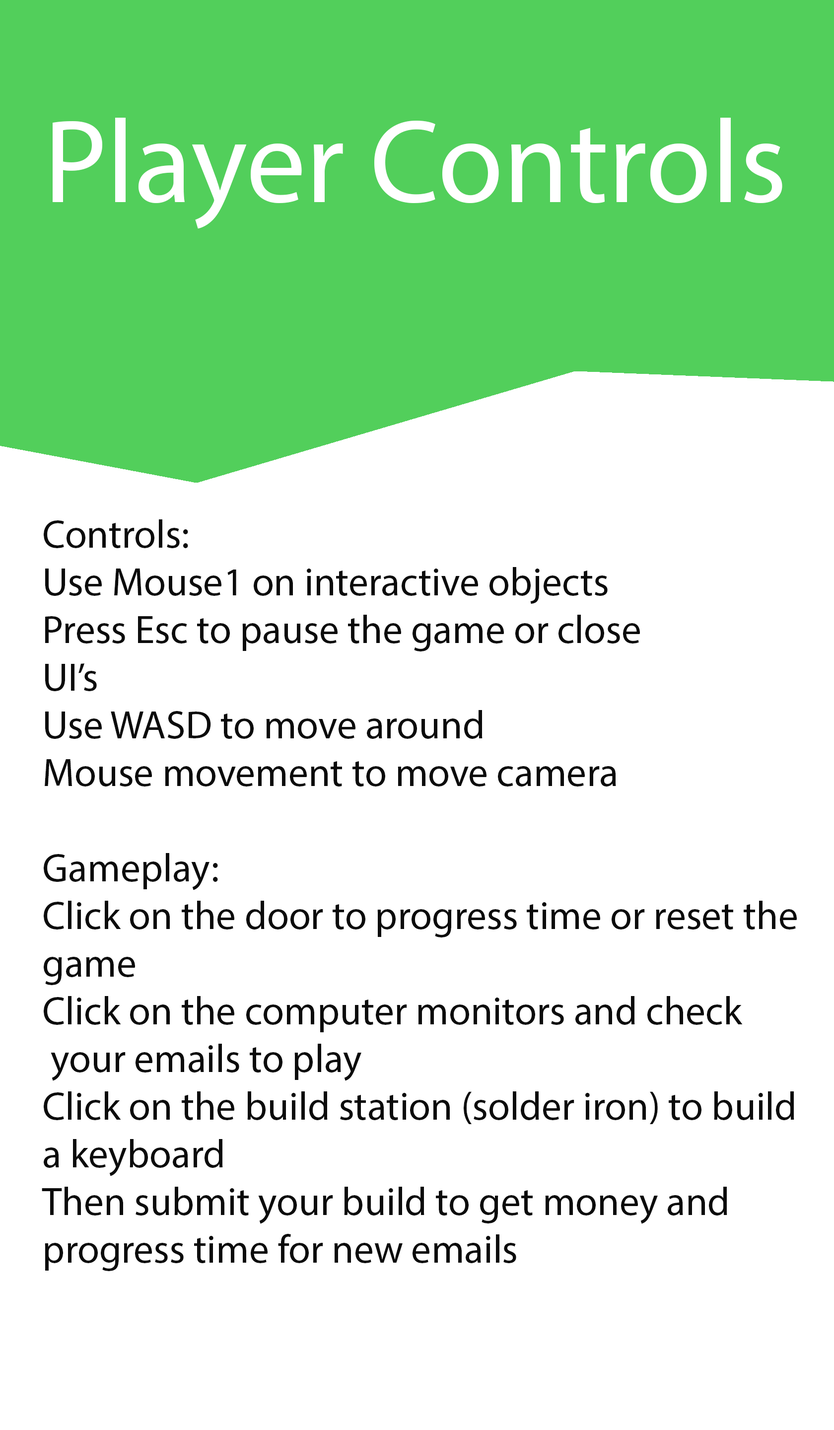
<style>
.page{position:relative;width:834px;height:1430px;background:#ffffff}
.page>*{position:absolute;margin:0}
.t1{font:119.1px "MyriadPro-Regular";color:#ffffff}
.t2{font:39.7px "MyriadPro-Regular";color:#0b0b0b}
</style>
<div class="page">
<p class="t1" style="left:53px;top:118px;width:729px;height:111px">Player Controls</p>
<p class="t2" style="left:42px;top:519px;width:755px;height:752px">Controls:<br>Use Mouse1 on interactive objects<br>Press Esc to pause the game or close<br>UI’s<br>Use WASD to move around <br>Mouse movement to move camera<br><br>Gameplay:<br>Click on the door to progress time or reset the<br>game<br>Click on the computer monitors and check<br> your emails to play<br>Click on the build station (solder iron) to build<br>a keyboard<br>Then submit your build to get money and<br>progress time for new emails</p>
</div>
